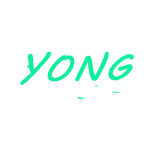
<style>
.page{position:relative;width:145px;height:145px;background:#ffffff}
.page>*{position:absolute;margin:0}
.t1{font:36px "MVBoli";letter-spacing:0.05em;color:#11ed9d;text-transform:uppercase;font-weight:bold;font-style:italic}
</style>
<div class="page">
<p class="t1" style="left:20px;top:51px;width:114px;height:34px">yong</p>
</div>
